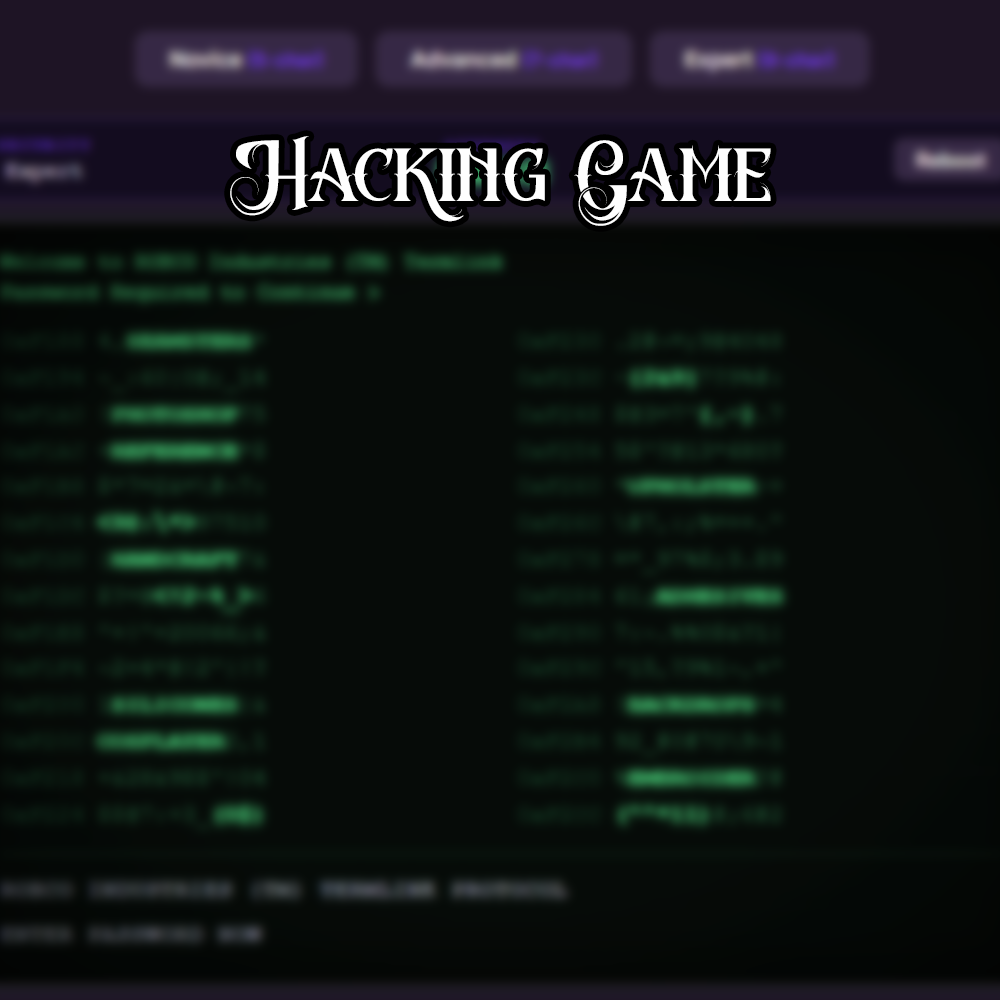
<style>
.page{position:relative;width:1000px;height:1000px;background:#060b08}
.page>*{position:absolute;margin:0}
.t1{font:50px "BattlesbridgeDemoRegular";color:#fefefe}
</style>
<div class="page">
<p class="t1" style="left:230px;top:136px;width:541px;height:90px;text-align:center">Hacking Game</p>
</div>
